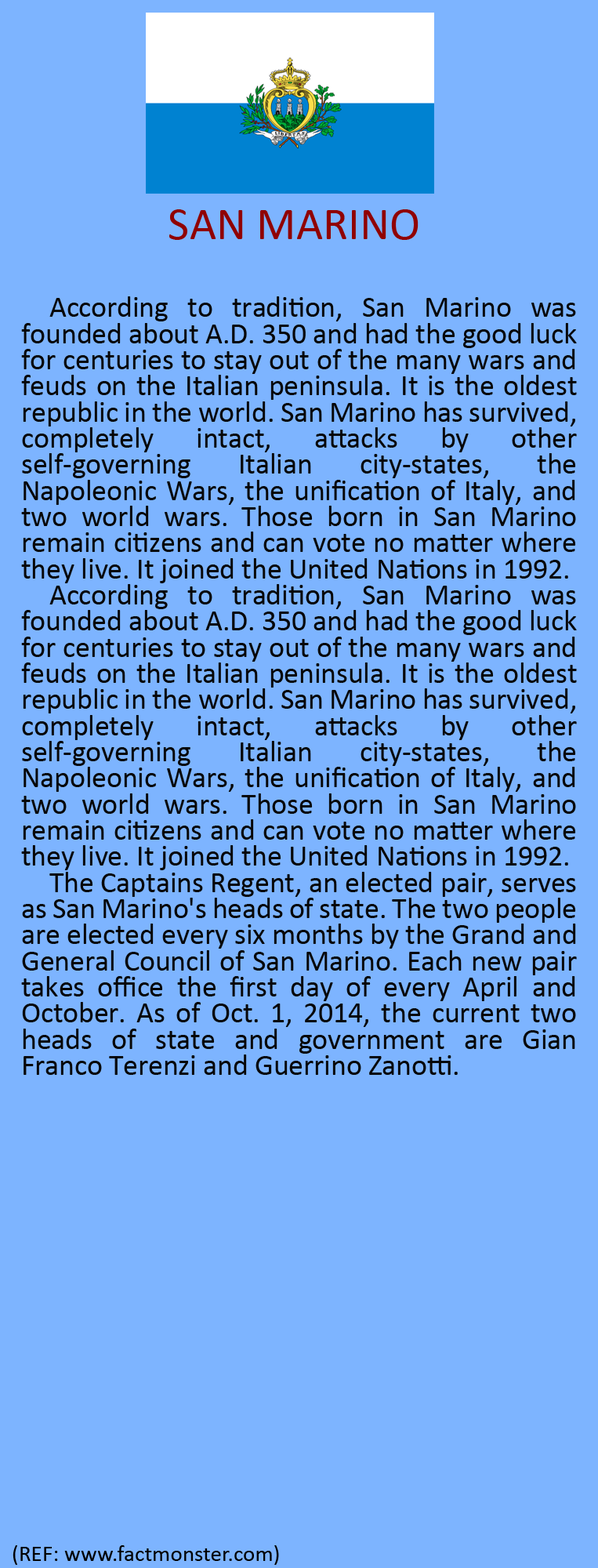
<style>
.page{position:relative;width:598px;height:1568px;background:#7db4ff}
.page>*{position:absolute;margin:0}
.t1{font:46.4px "Calibri";color:#900101;text-transform:uppercase}
.t2{font:29.4px/26.1px "Calibri";color:#070707}
.t3{font:22.9px "Calibri";color:#000000}
</style>
<div class="page">
<p class="t1" style="left:169px;top:209px;width:250px;height:31px">san marino</p>
<p class="t2" style="left:21px;top:296px;width:556px;height:779px;text-align:justify">According to tradition, San Marino was founded about A.D. 350 and had the good luck for centuries to stay out of the many wars and feuds on the Italian peninsula. It is the oldest republic in the world. San Marino has survived, completely intact, attacks by other self-governing Italian city-states, the Napoleonic Wars, the unification of Italy, and two world wars. Those born in San Marino remain citizens and can vote no matter where they live. It joined the United Nations in 1992.<br> According to tradition, San Marino was founded about A.D. 350 and had the good luck for centuries to stay out of the many wars and feuds on the Italian peninsula. It is the oldest republic in the world. San Marino has survived, completely intact, attacks by other self-governing Italian city-states, the Napoleonic Wars, the unification of Italy, and two world wars. Those born in San Marino remain citizens and can vote no matter where they live. It joined the United Nations in 1992.<br> The Captains Regent, an elected pair, serves as San Marino's heads of state. The two people are elected every six months by the Grand and General Council of San Marino. Each new pair takes office the first day of every April and October. As of Oct. 1, 2014, the current two heads of state and government are Gian Franco Terenzi and Guerrino Zanotti.</p>
<p class="t3" style="left:13px;top:1545px;width:266px;height:20px">(REF: www.factmonster.com)</p>
</div>
